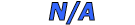
<style>
.page{position:relative;width:135px;height:25px;background:#ffffff}
.page>*{position:absolute;margin:0}
.t1{font:24px "Tahoma-Bold";letter-spacing:-0.065em;font-weight:bold;font-style:italic}
</style>
<div class="page">
<p class="t1" style="left:48px;top:1px;width:47px;height:24px">N/A</p>
</div>
